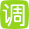
<style>
.page{position:relative;width:29px;height:29px;background:#95d41b}
.page>*{position:absolute;margin:0}
.t1{font:24px "STYuanti-SC-Regular";letter-spacing:0.1em;color:#ffffff}
</style>
<div class="page">
<p class="t1" style="left:2px;top:4px;width:23px;height:23px">调</p>
</div>
